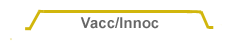
<style>
.page{position:relative;width:239px;height:42px;background:#ffffff}
.page>*{position:absolute;margin:0}
.t1{font:15px "Arial-BoldMT";color:#666666}
</style>
<div class="page">
<p class="t1" style="left:80px;top:17px;width:79px;height:12px">Vacc/Innoc</p>
</div>
